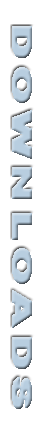
<style>
.page{position:relative;width:42px;height:440px;background:#ffffff}
.page>*{position:absolute;margin:0}
.t1{font:26px "Arial-Black";letter-spacing:0.25em;color:#b8cee0;font-weight:bold;scale:1.75 1}
</style>
<div class="page">
<p class="t1" style="left:12px;top:26px;width:20px;height:383px;rotate:90deg">DOWNLOADS</p>
</div>
